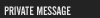
<style>
.page{position:relative;width:100px;height:18px;background:#232323}
.page>*{position:absolute;margin:0}
.t1{font:12px "AlternateGothicNo2BT-Regular";color:#e5e5e5;text-transform:uppercase}
</style>
<div class="page">
<p class="t1" style="left:4px;top:6px;width:67px;height:9px">private message</p>
</div>
